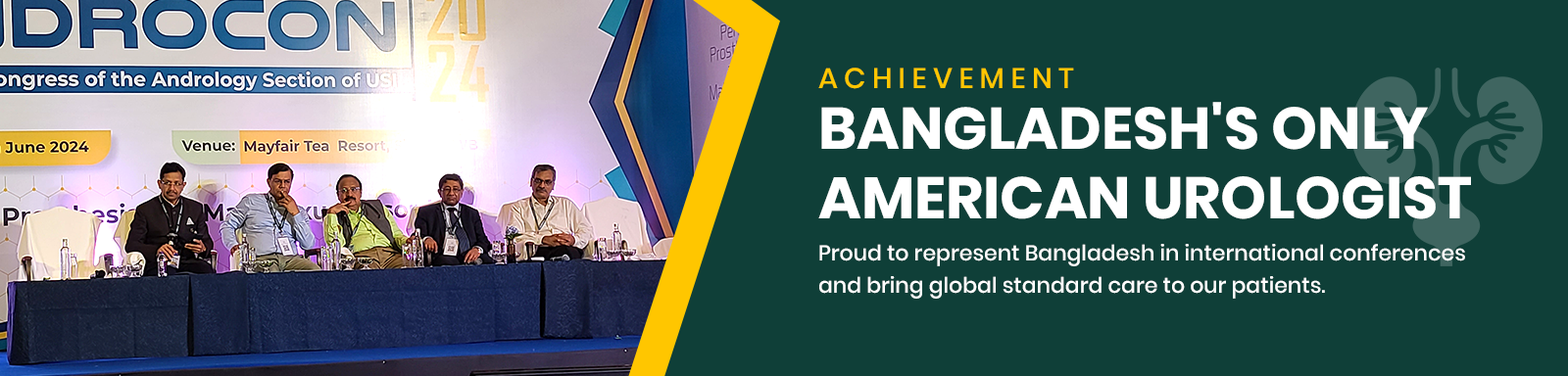
<style>
.page{position:relative;width:1568px;height:376px;background:#0f3f38}
.page>*{position:absolute;margin:0}
.t1{font:28.6px "Poppins-Medium";letter-spacing:0.22em;color:#ffc600}
.t2{font:58.6px/69.4px "Poppins-Bold";color:#ffffff;text-transform:uppercase}
.t3{font:21.6px/32.3px "Poppins-Medium";color:#ffffff}
</style>
<div class="page">
<p class="t1" style="left:818px;top:68px;width:256px;height:21px">ACHIEVEMENT</p>
<p class="t2" style="left:818px;top:102px;width:653px;height:118px">Bangladesh's Only <br>American Urologist</p>
<p class="t3" style="left:819px;top:244px;width:646px;height:55px">Proud to represent Bangladesh in international conferences <br>and bring global standard care to our patients.</p>
</div>
